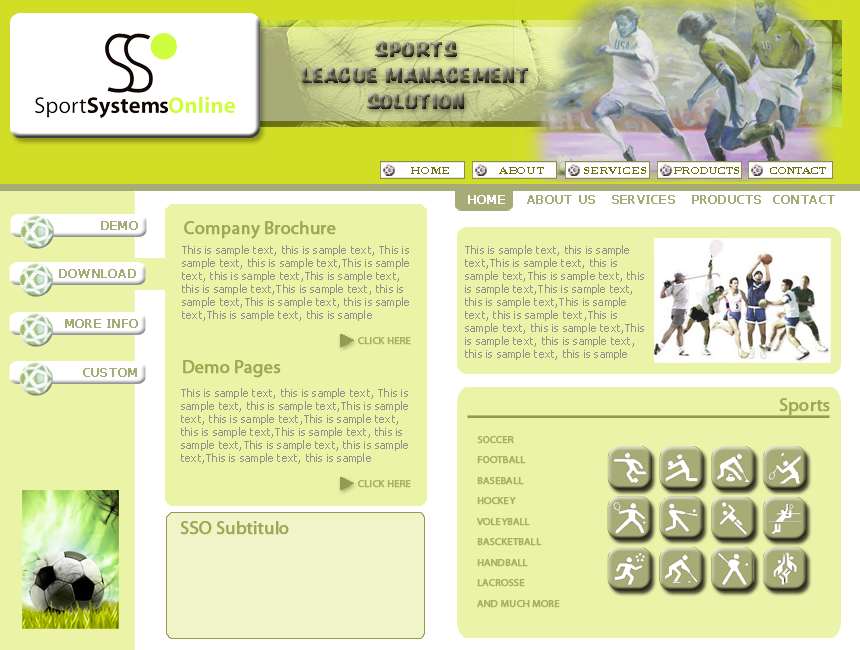
<style>
.page{position:relative;width:860px;height:650px}
.page>*{position:absolute;margin:0}
.t1{font:20.8px "BRADDON";letter-spacing:0.02em;font-weight:bold}
.t2{font:10.6px "BodoniBT-Roman";letter-spacing:-0.01em;color:#6a7014;scale:1.25 1}
.t3{font:10.6px "BodoniBT-Roman";letter-spacing:-0.075em;color:#6a7014;scale:1.25 1}
.t4{font:12.5px "Tahoma";letter-spacing:0.02em;color:#a7ab75;font-weight:bold}
.t5{font:12.5px "Tahoma";letter-spacing:0.02em;color:#fefefe;font-weight:bold}
.t6{font:18px "MyriadPro-Regular";color:#9baa52;font-weight:bold}
.t7{font:11px/13px "Tahoma";letter-spacing:0.02em;color:#868787}
.t8{font:10.4px "MyriadPro-Regular";color:#a6b260;font-weight:bold}
.t9{font:10.4px/12.5px "MyriadPro-Regular";color:#a6b260;font-weight:bold}
</style>
<div class="page">
<p class="t1" style="left:375px;top:41px;width:82px;height:16px">SPORTS</p>
<p class="t1" style="left:302px;top:67px;width:226px;height:16px">LEAGUE MANAGEMENT</p>
<p class="t1" style="left:367px;top:93px;width:97px;height:16px">SOLUTION</p>
<p class="t2" style="left:411px;top:167px;width:38px;height:7px">HOME</p>
<p class="t2" style="left:499px;top:167px;width:45px;height:7px">ABOUT</p>
<p class="t2" style="left:584px;top:167px;width:62px;height:7px">SERVICES</p>
<p class="t3" style="left:674px;top:167px;width:65px;height:7px">PRODUCTS</p>
<p class="t3" style="left:770px;top:167px;width:56px;height:7px">CONTACT</p>
<p class="t4" style="left:468px;top:195px;width:367px;height:9px"><span class="t5">HOME   </span> ABOUT US   SERVICES   PRODUCTS  CONTACT</p>
<p class="t4" style="left:101px;top:221px;width:37px;height:9px">DEMO</p>
<p class="t6" style="left:184px;top:221px;width:152px;height:18px">Company Brochure</p>
<p class="t7" style="left:182px;top:245px;width:227px;height:76px;opacity:0.9">This is sample text, this is sample text, This is sample text, this is sample text,This is sample text, this is sample text,This is sample text, this is sample text,This is sample text, this is sample text,This is sample text, this is sample text,This is sample text, this is sample text,This is sample text, this is sample text,</p>
<p class="t7" style="left:465px;top:245px;width:179px;height:115px;opacity:0.9">This is sample text, this is sample text,This is sample text, this is sample text,This is sample text, this is sample text,This is sample text, this is sample text,This is sample text, this is sample text,This is sample text, this is sample text,This is sample text, this is sample text, this is sample text, this is sample text</p>
<p class="t4" style="left:59px;top:269px;width:77px;height:9px">DOWNLOAD</p>
<p class="t4" style="left:65px;top:319px;width:73px;height:9px">MORE INFO</p>
<p class="t8" style="left:358px;top:337px;width:53px;height:8px">CLICK HERE</p>
<p class="t6" style="left:183px;top:360px;width:98px;height:18px">Demo Pages</p>
<p class="t4" style="left:83px;top:368px;width:54px;height:9px">CUSTOM</p>
<p class="t7" style="left:181px;top:388px;width:227px;height:76px;opacity:0.9">This is sample text, this is sample text, This is sample text, this is sample text,This is sample text, this is sample text,This is sample text, this is sample text,This is sample text, this is sample text,This is sample text, this is sample text,This is sample text, this is sample text,This is sample text, this is sample text,</p>
<p class="t6" style="left:779px;top:398px;width:51px;height:18px">Sports</p>
<p class="t9" style="left:477px;top:436px;width:83px;height:172px">SOCCER<br>FOOTBALL<br>BASEBALL<br>HOCKEY<br>VOLEYBALL<br>BASCKETBALL<br>HANDBALL<br>LACROSSE<br>AND MUCH MORE</p>
<p class="t8" style="left:358px;top:480px;width:53px;height:8px">CLICK HERE</p>
<p class="t6" style="left:180px;top:521px;width:109px;height:14px">SSO Subtitulo</p>
</div>
